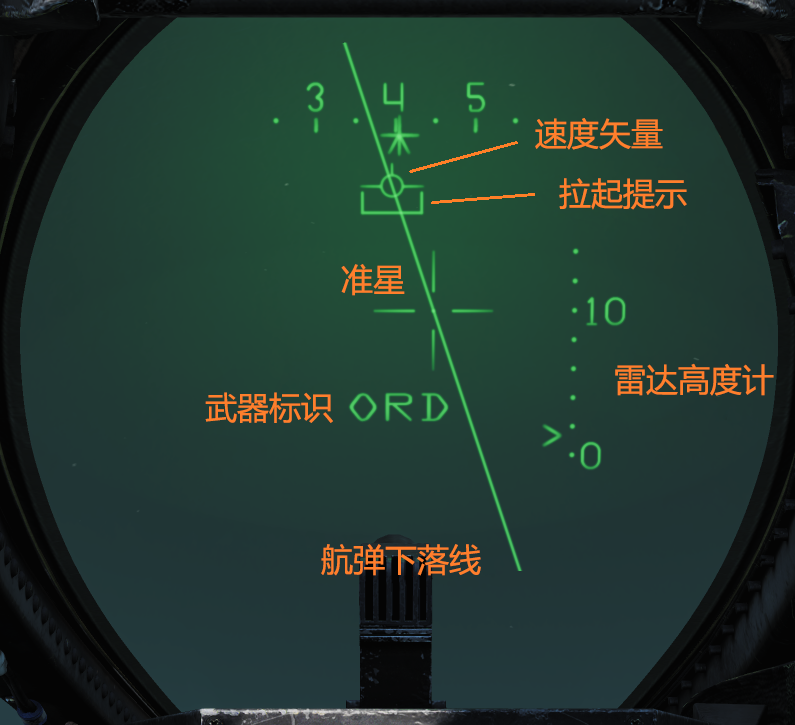
<style>
.page{position:relative;width:795px;height:725px}
.page>*{position:absolute;margin:0}
.t1{font:32px "MicrosoftYaHei";color:#ff7f2c}
</style>
<div class="page">
<p class="t1" style="left:535px;top:118px;width:128px;height:32px">速度矢量</p>
<p class="t1" style="left:559px;top:178px;width:128px;height:32px">拉起提示</p>
<p class="t1" style="left:341px;top:264px;width:64px;height:32px">准星</p>
<p class="t1" style="left:615px;top:363px;width:159px;height:33px">雷达高度计</p>
<p class="t1" style="left:205px;top:392px;width:128px;height:31px">武器标识</p>
<p class="t1" style="left:321px;top:544px;width:160px;height:32px">航弹下落线</p>
</div>
